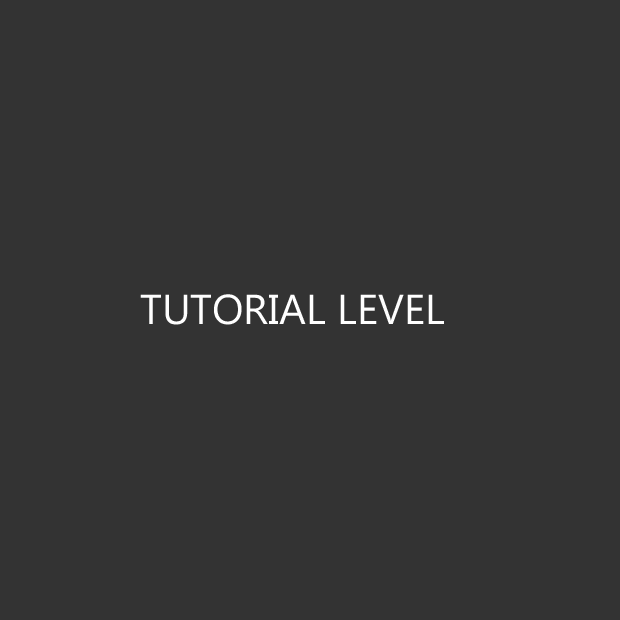
<style>
.page{position:relative;width:620px;height:620px;background:#333333}
.page>*{position:absolute;margin:0}
.t1{font:41.7px "MicrosoftPhagsPa";color:#ffffff}
</style>
<div class="page">
<p class="t1" style="left:140px;top:294px;width:304px;height:31px">TUTORIAL LEVEL</p>
</div>
